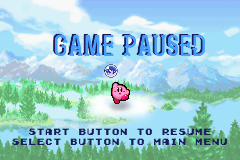
<style>
.page{position:relative;width:240px;height:160px}
.page>*{position:absolute;margin:0}
.t1{font:29.2px "ZenzeroGrotesk-Regular"}
.t2{font:29.2px "ZenzeroGrotesk-Regular";color:#469ffc}
.t3{font:8.3px "GamegirlClassic";color:#1b1960}
</style>
<div class="page">
<p class="t1" style="left:53px;top:33px;width:150px;height:23px">GAME PAUSED</p>
<p class="t2" style="left:55px;top:34px;width:150px;height:23px">GAME PAUSED</p>
<p class="t3" style="left:12px;top:128px;width:215px;height:17px;text-align:center">START BUTTON TO RESUME<br>SELECT BUTTON TO MAIN MENU</p>
</div>
